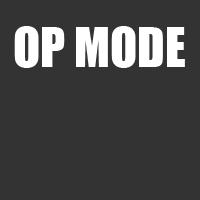
<style>
.page{position:relative;width:200px;height:200px;background:#333333}
.page>*{position:absolute;margin:0}
.t1{font:12px "Impact";color:#ffffff}
</style>
<div class="page">
<p class="t1" style="left:14px;top:26px;width:171px;height:42px">OP MODE</p>
</div>
